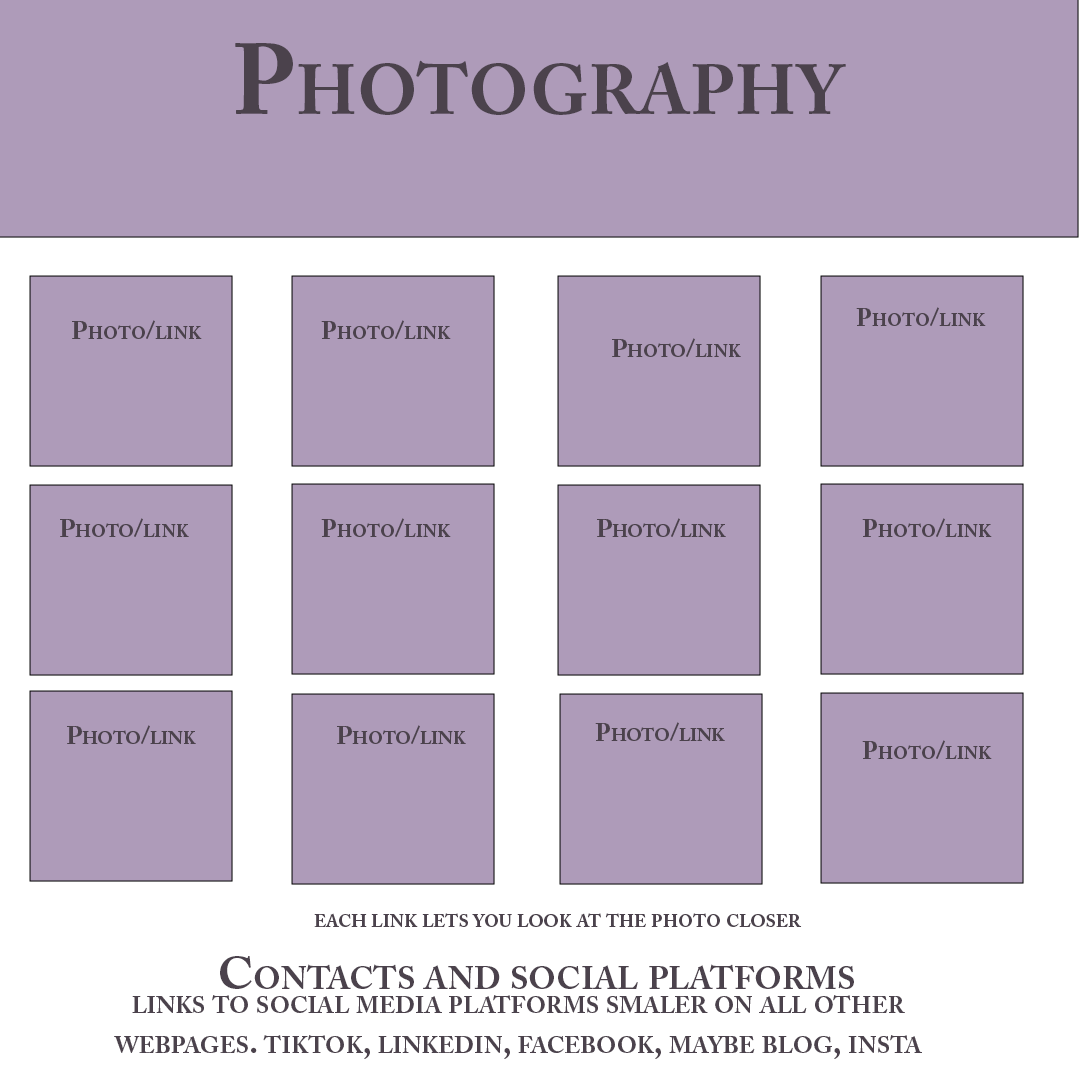
<style>
.page{position:relative;width:1080px;height:1080px;background:#ae9bb9}
.page>*{position:absolute;margin:0}
.t1{font:100px "ACaslonPro-Bold";color:#4b424c;font-variant:small-caps}
.t2{font:25px "ACaslonPro-Bold";color:#4b424c;font-variant:small-caps}
.t3{font:45.8px "ACaslonPro-Bold";color:#4b424c;font-variant:small-caps}
.t4{font:33.3px "ACaslonPro-Bold";color:#4b424c;font-variant:small-caps}
</style>
<div class="page">
<p class="t1" style="left:235px;top:43px;width:611px;height:72px">Photography</p>
<p class="t2" style="left:856px;top:307px;width:130px;height:19px">Photo/link</p>
<p class="t2" style="left:72px;top:320px;width:130px;height:19px">Photo/link</p>
<p class="t2" style="left:321px;top:320px;width:130px;height:19px">Photo/link</p>
<p class="t2" style="left:612px;top:338px;width:129px;height:19px">Photo/link</p>
<p class="t2" style="left:60px;top:518px;width:129px;height:19px">Photo/link</p>
<p class="t2" style="left:321px;top:518px;width:130px;height:19px">Photo/link</p>
<p class="t2" style="left:597px;top:518px;width:129px;height:19px">Photo/link</p>
<p class="t2" style="left:862px;top:518px;width:130px;height:19px">Photo/link</p>
<p class="t2" style="left:67px;top:725px;width:129px;height:19px">Photo/link</p>
<p class="t2" style="left:337px;top:725px;width:129px;height:19px">Photo/link</p>
<p class="t2" style="left:595px;top:722px;width:130px;height:19px">Photo/link</p>
<p class="t2" style="left:862px;top:740px;width:130px;height:19px">Photo/link</p>
<p class="t2" style="left:314px;top:913px;width:488px;height:14px">each link lets you look at the photo closer</p>
<p class="t3" style="left:220px;top:956px;width:634px;height:33px">Contacts and social platforms</p>
<p class="t4" style="left:114px;top:995px;width:808px;height:64px;text-align:center">links to social media platforms smaler on all other webpages. tiktok, linkedin, facebook, maybe blog, insta</p>
</div>
